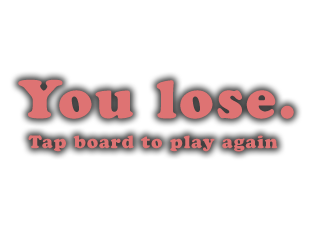
<style>
.page{position:relative;width:320px;height:230px;background:#ffffff}
.page>*{position:absolute;margin:0}
.t1{font:54px "CooperBlackStd";letter-spacing:0.05em;color:#de7373}
.t2{font:18px "CooperBlackStd";letter-spacing:0.05em;color:#de7373}
</style>
<div class="page">
<p class="t1" style="left:18px;top:79px;width:276px;height:40px">You lose.</p>
<p class="t2" style="left:28px;top:135px;width:250px;height:17px">Tap board to play again</p>
</div>
